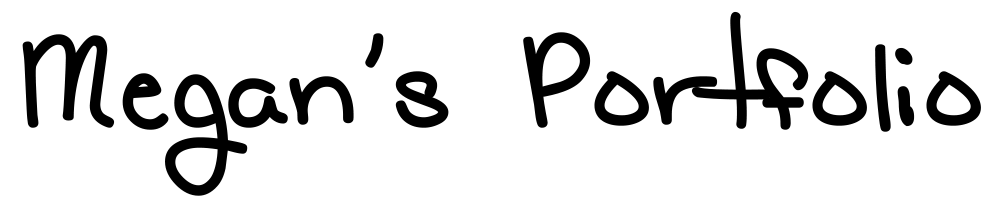
<style>
.page{position:relative;width:999px;height:211px;background:#ffffff}
.page>*{position:absolute;margin:0}
.t1{font:125px "CatholicSchoolGirlsBB";color:#000000;font-weight:bold}
.t2{font:125px "LunaBar";color:#000000;font-weight:bold}
.t3{font:150px "LunaBar";color:#000000;font-weight:bold}
</style>
<div class="page">
<p class="t1" style="left:22px;top:11px;width:959px;height:185px">Megan’s Por<span class="t2">t</span>fol<span class="t3">i</span>o</p>
</div>
